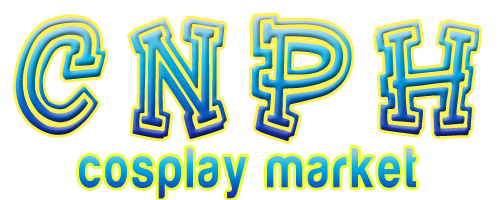
<style>
.page{position:relative;width:500px;height:200px;background:#ffffff}
.page>*{position:absolute;margin:0}
.t1{font:170.5px "HeeHaw-Regular";letter-spacing:0.1em;scale:0.88 1}
.t2{font:58.6px "Harabara";letter-spacing:0.1em;scale:0.78 1}
</style>
<div class="page">
<p class="t1" style="left:15px;top:15px;width:465px;height:126px">CNPH</p>
<p class="t2" style="left:79px;top:148px;width:337px;height:51px">cosplay market</p>
</div>
